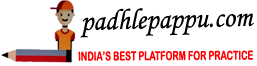
<style>
.page{position:relative;width:257px;height:66px;background:#ffffff}
.page>*{position:absolute;margin:0}
.t1{font:29.3px "MonotypeCorsiva";color:#000000;scale:0.96 1}
.t2{font:12.4px "ArialRoundedMTBold";color:#fc0202;scale:0.7 1}
</style>
<div class="page">
<p class="t1" style="left:80px;top:8px;width:174px;height:30px;rotate:-1deg">padhlepappu.com</p>
<p class="t2" style="left:78px;top:50px;width:176px;height:11px">INDIA’S BEST PLATFORM FOR PRACTICE</p>
</div>
